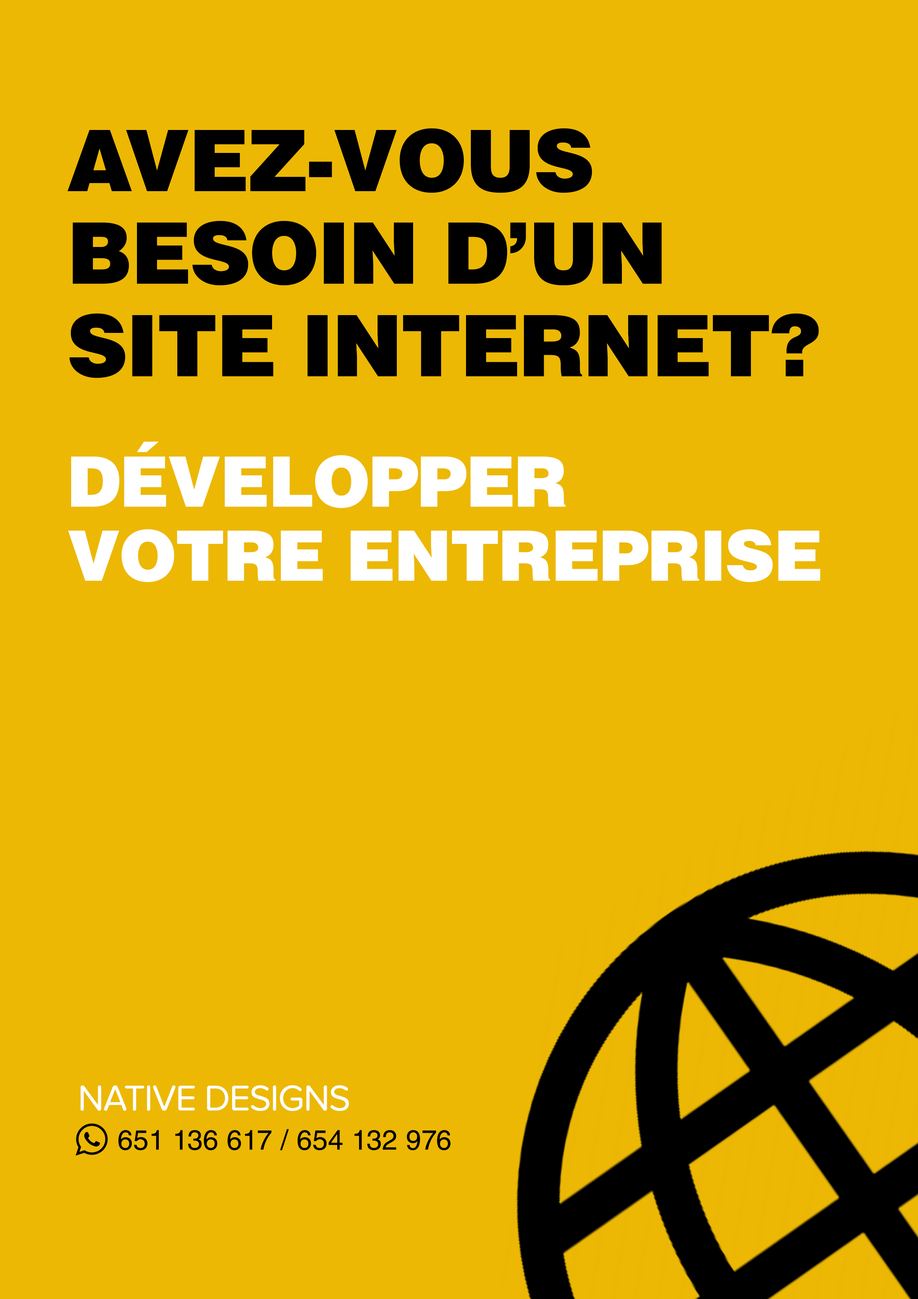
<style>
.page{position:relative;width:918px;height:1299px;background:#ecb804}
.page>*{position:absolute;margin:0}
.t1{font:84.8px/92.6px "HelveticaLTStd-Blk";letter-spacing:-0.025em;color:#000000}
.t2{font:69.4px/74px "HelveticaLTStd-Blk";letter-spacing:-0.025em;color:#ffffff}
.t3{font:37px "ProximaNovaSoft-Regular";letter-spacing:-0.025em;color:#ffffff}
.t4{font:27.8px "HelveticaLTStd-Roman";letter-spacing:0.01em;color:#000000}
</style>
<div class="page">
<p class="t1" style="left:67px;top:128px;width:752px;height:250px">AVEZ-VOUS<br>BESOIN D’UN<br>SITE INTERNET?</p>
<p class="t2" style="left:68px;top:441px;width:752px;height:141px">DÉVELOPPER<br>VOTRE ENTREPRISE</p>
<p class="t3" style="left:80px;top:1085px;width:269px;height:26px">NATIVE DESIGNS</p>
<p class="t4" style="left:118px;top:1129px;width:333px;height:21px">651 136 617 / 654 132 976</p>
</div>
